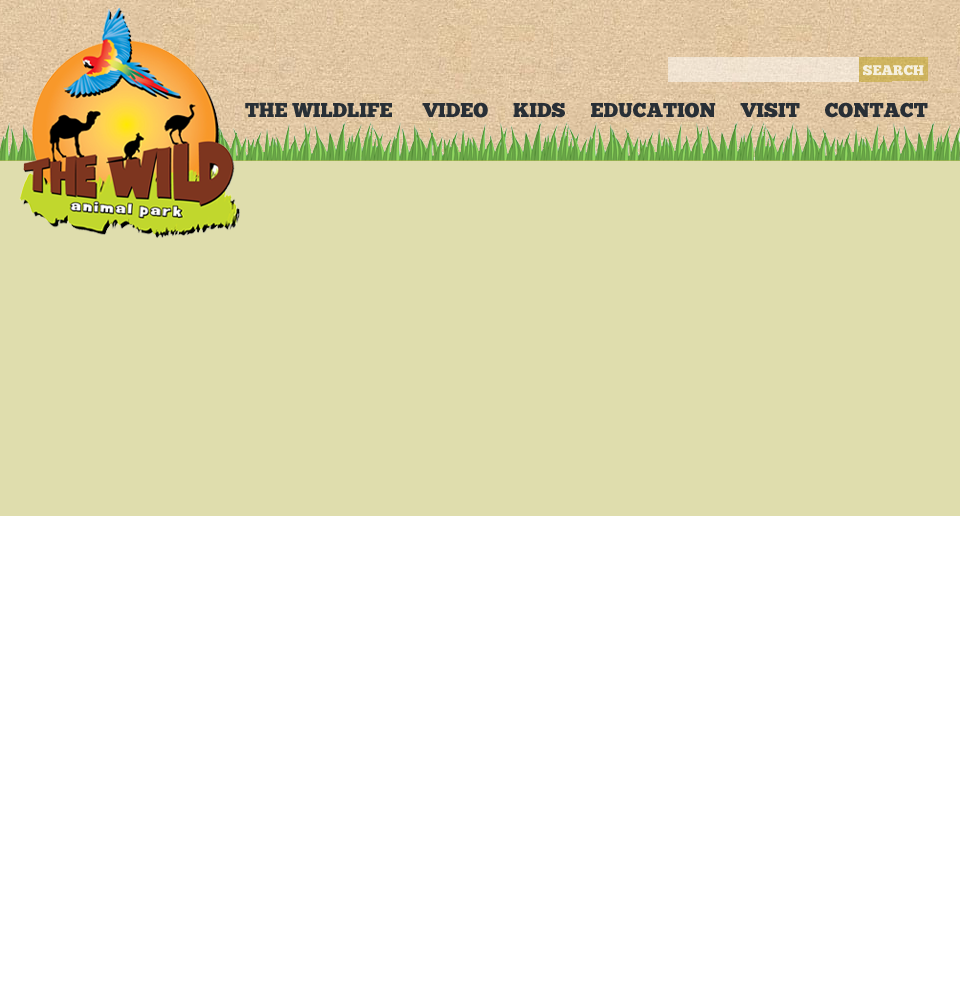
<style>
.page{position:relative;width:960px;height:1000px;background:#ffffff}
.page>*{position:absolute;margin:0}
.t1{font:14px "ChunkFive";color:#f5f0df}
.t2{font:20px "ChunkFive";color:#282f36}
</style>
<div class="page">
<p class="t1" style="left:863px;top:65px;width:61px;height:11px">SEARCH</p>
<p class="t2" style="left:245px;top:102px;width:683px;height:16px">THE WILDLIFE      VIDEO     KIDS     EDUCATION     VISIT     CONTACT</p>
</div>
